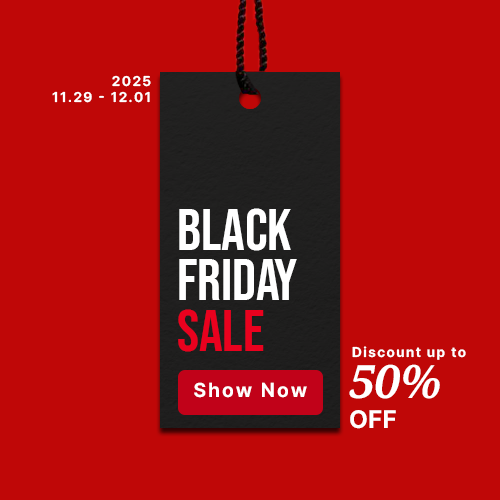
<style>
.page{position:relative;width:500px;height:500px;background:#bf0707}
.page>*{position:absolute;margin:0}
.t1{font:14px "Pretendard-Bold";letter-spacing:0.1em;color:#ffffff}
.t2{font:58.8px/50.4px "BebasNeue-Regular";color:#ffffff}
.t3{font:58.8px/50.4px "BebasNeue-Regular";letter-spacing:-0.1em;color:#ffffff}
.t4{font:58.8px/50.4px "BebasNeue-Regular";color:#ea011e}
.t5{font:25px "Pretendard-Bold";color:#ffffff;text-transform:uppercase}
.t6{font:46px "NotoSerif-BoldItalic";color:#ffffff}
.t7{font:46px "NotoSerif-BoldItalic";letter-spacing:0.1em;color:#ffffff}
.t8{font:20px "Pretendard-Bold";letter-spacing:0.1em;color:#ffffff}
</style>
<div class="page">
<p class="t1" style="left:52px;top:75px;width:99px;height:28px;text-align:right">2025<br>11.29 - 12.01</p>
<p class="t2" style="left:178px;top:208px;width:119px;height:144px">BLACK<br>FRID<span class="t3">AY<br></span><span class="t4">SALE</span></p>
<p class="t1" style="left:352px;top:346px;width:114px;height:14px">Discount up to</p>
<p class="t5" style="left:349px;top:364px;width:91px;height:65px"><span class="t6">50</span><span class="t7">%<br></span>off</p>
<p class="t8" style="left:194px;top:382px;width:113px;height:16px">Show Now</p>
</div>
